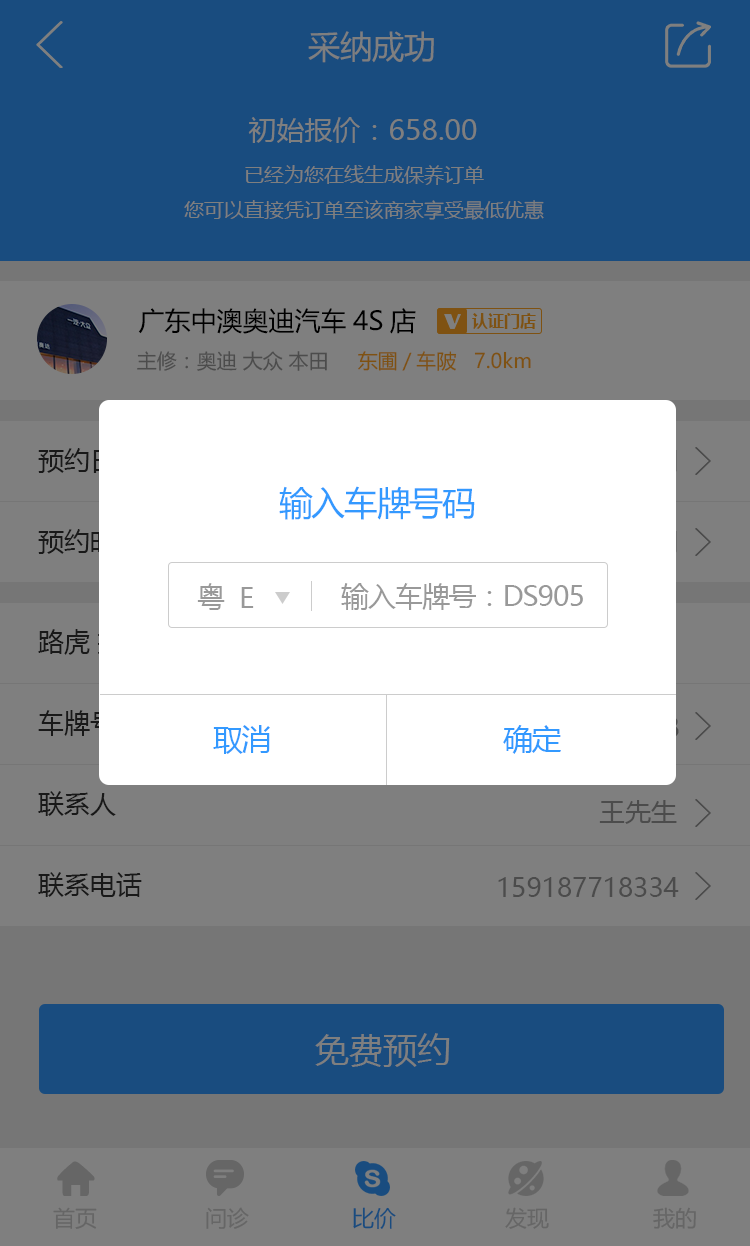
<style>
.page{position:relative;width:750px;height:1246px;background:#7f7f7f}
.page>*{position:absolute;margin:0}
.t1{font:32px "MicrosoftYaHei";color:#7f7f7f}
.t2{font:28px "MicrosoftYaHei";color:#7f7f7f}
.t3{font:20px "MicrosoftYaHei";color:#7f7f7f}
.t4{font:26px "MicrosoftYaHei";color:#000000}
.t5{font:20px "MicrosoftYaHei";color:#4c4c4c}
.t6{font:20px "MicrosoftYaHei";color:#7f5212}
.t7{font:34px "MicrosoftYaHei";letter-spacing:-0.04em;color:#3399ff}
.t8{font:28px "MicrosoftYaHei";letter-spacing:-0.04em;color:#999999}
.t9{font:30px "MicrosoftYaHei";letter-spacing:-0.04em;color:#3399ff}
.t10{font:26px "MicrosoftYaHei";color:#191919}
.t11{font:26px "MicrosoftYaHei";color:#4c4c4c}
.t12{font:34px "MicrosoftYaHei";color:#7f7f7f}
.t13{font:22px "MicrosoftYaHei";color:#666666}
.t14{font:22px "MicrosoftYaHei";color:#194c7f}
</style>
<div class="page">
<p class="t1" style="left:308px;top:31px;width:126px;height:32px">采纳成功</p>
<p class="t2" style="left:248px;top:117px;width:229px;height:26px">初始报价：658.00</p>
<p class="t3" style="left:184px;top:165px;width:360px;height:55px;text-align:center">已经为您在线生成保养订单<br>您可以直接凭订单至该商家享受最低优惠</p>
<p class="t4" style="left:138px;top:308px;width:278px;height:26px">广东中澳奥迪汽车4S店</p>
<p class="t5" style="left:137px;top:351px;width:190px;height:20px">主修：奥迪 大众 本田</p>
<p class="t6" style="left:358px;top:351px;width:173px;height:20px">东圃/车陂   7.0km</p>
<p class="t7" style="left:279px;top:486px;width:196px;height:34px">输入车牌号码</p>
<p class="t8" style="left:197px;top:583px;width:28px;height:27px">粤</p>
<p class="t8" style="left:241px;top:587px;width:13px;height:21px">E</p>
<p class="t8" style="left:341px;top:583px;width:242px;height:27px">输入车牌号：DS905</p>
<p class="t9" style="left:213px;top:725px;width:57px;height:29px">取消</p>
<p class="t9" style="left:503px;top:725px;width:58px;height:29px">确定</p>
<p class="t10" style="left:38px;top:791px;width:78px;height:25px">联系人</p>
<p class="t11" style="left:599px;top:800px;width:78px;height:24px">王先生</p>
<p class="t10" style="left:38px;top:872px;width:104px;height:25px">联系电话</p>
<p class="t11" style="left:498px;top:877px;width:181px;height:20px">159187718334</p>
<p class="t12" style="left:315px;top:1033px;width:135px;height:34px">免费预约</p>
<p class="t13" style="left:53px;top:1207px;width:44px;height:22px">首页</p>
<p class="t13" style="left:206px;top:1207px;width:43px;height:22px">问诊</p>
<p class="t14" style="left:353px;top:1207px;width:43px;height:22px">比价</p>
<p class="t13" style="left:505px;top:1207px;width:44px;height:22px">发现</p>
<p class="t13" style="left:653px;top:1207px;width:43px;height:22px">我的</p>
</div>
